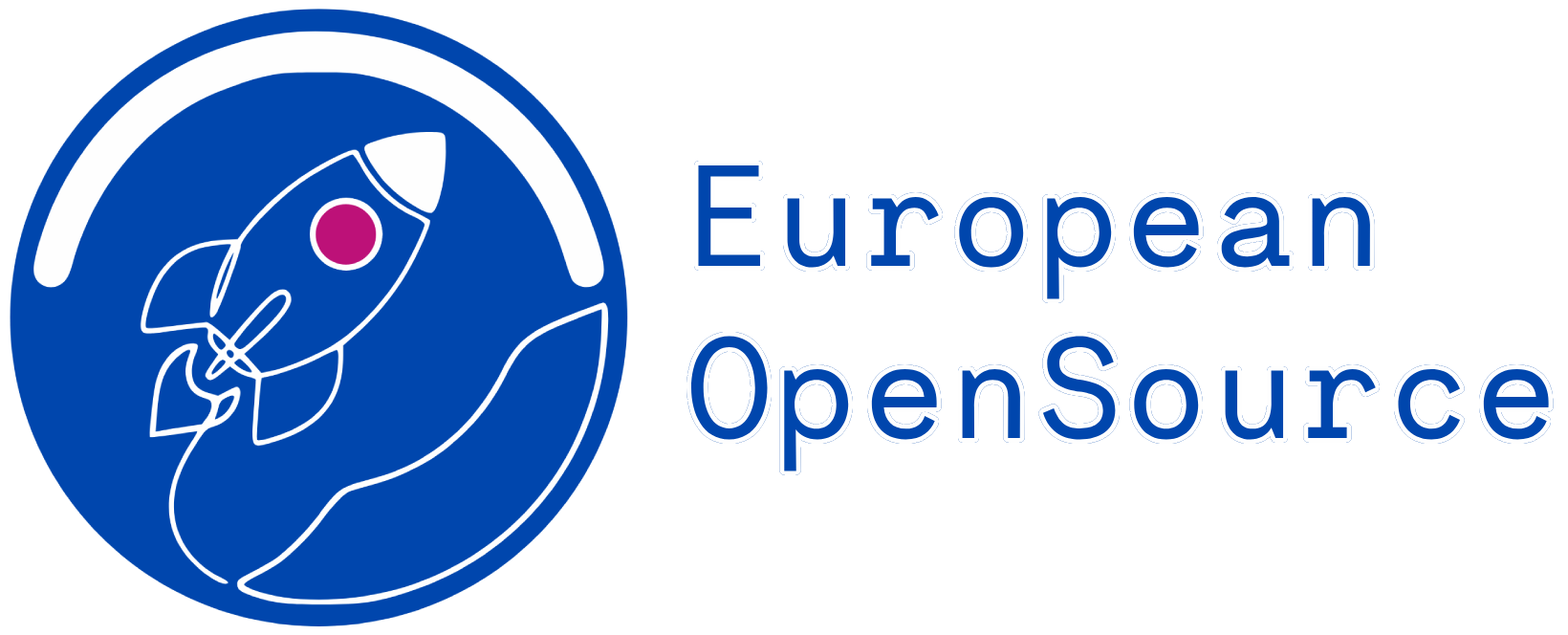
<style>
.page{position:relative;width:1568px;height:635px;background:#ffffff}
.page>*{position:absolute;margin:0}
.t1{font:143.4px "NectoMono-Regular";color:#0046ad}
</style>
<div class="page">
<p class="t1" style="left:691px;top:165px;width:858px;height:306px">European<br>OpenSource</p>
<p class="t1" style="left:691px;top:165px;width:859px;height:306px">European<br>OpenSource</p>
</div>
